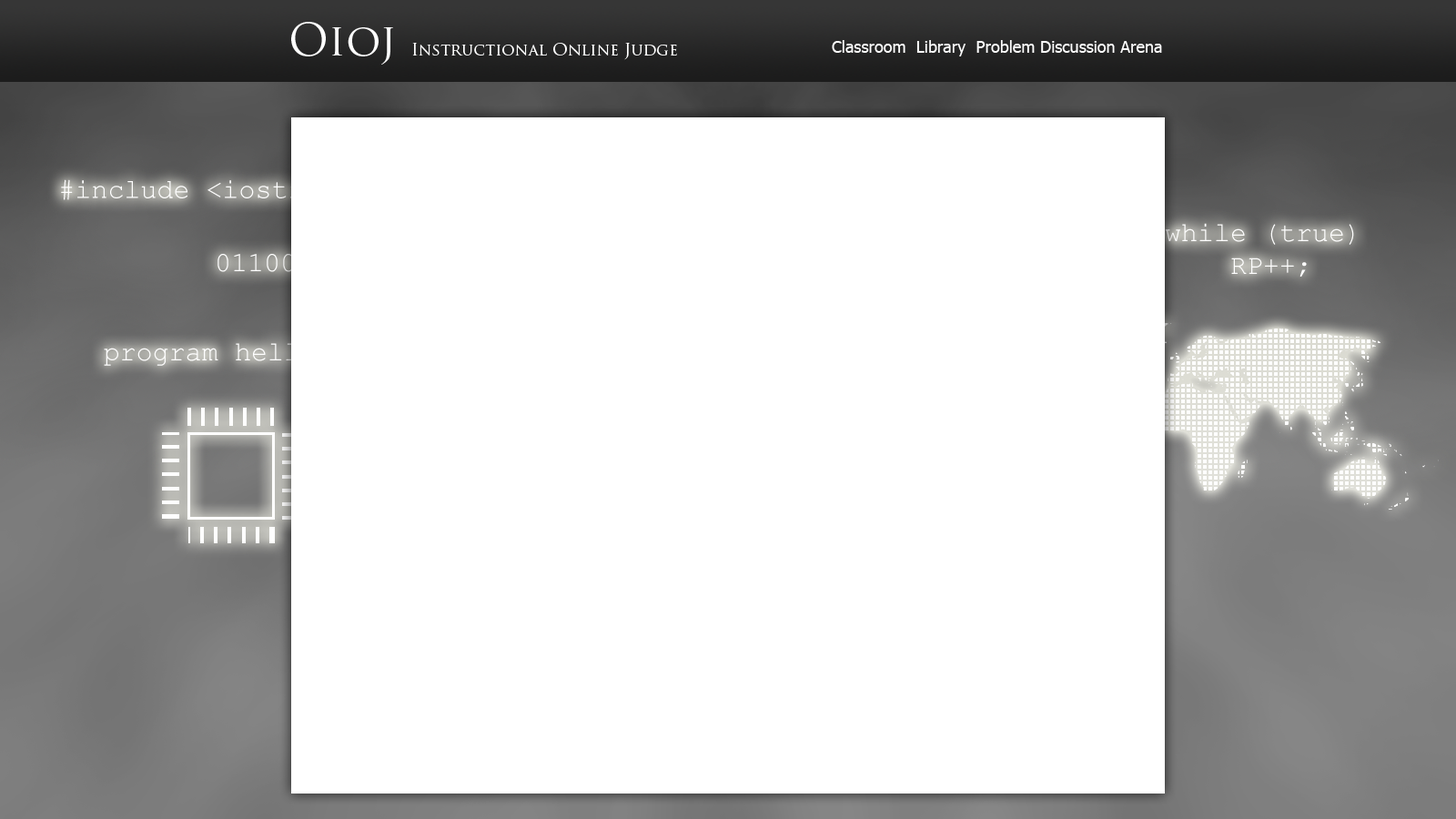
<style>
.page{position:relative;width:1456px;height:819px;background:#ffffff}
.page>*{position:absolute;margin:0}
.t1{font:16.4px "TrajanPro-Regular";color:#ffffff}
.t2{font:43.7px "TrajanPro-Regular";color:#ffffff}
.t3{font:16.4px "Tahoma";color:#ffffff}
.t4{font:27.3px "CourierNewPSMT";color:#ffffff}
</style>
<div class="page">
<p class="t1" style="left:291px;top:22px;width:386px;height:43px"><span class="t2">Oioj </span>Instructional Online Judge</p>
<p class="t3" style="left:832px;top:40px;width:330px;height:16px">Classroom  Library  Problem Discussion Arena</p>
<p class="t4" style="left:61px;top:179px;width:308px;height:21px">#include &lt;iostream&gt;</p>
<p class="t4" style="left:1165px;top:223px;width:189px;height:54px">while (true)<br>    RP++;</p>
<p class="t4" style="left:104px;top:343px;width:224px;height:23px">program hello;</p>
</div>
